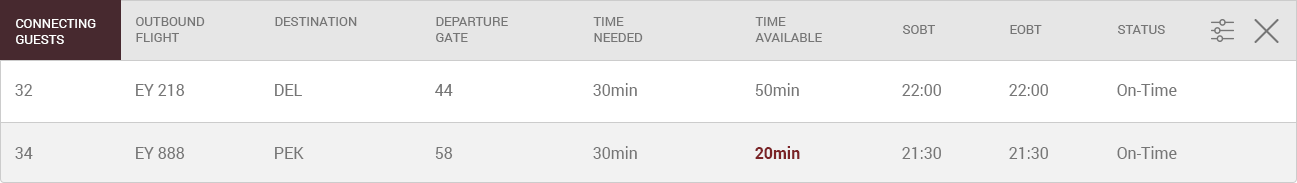
<style>
.page{position:relative;width:1297px;height:183px;background:#ffffff}
.page>*{position:absolute;margin:0}
.t1{font:13px "Roboto-Regular";color:#767676;text-transform:uppercase}
.t2{font:13px "Roboto-Regular";color:#ffffff;text-transform:uppercase}
.t3{font:16px "Roboto-Regular";color:#767676}
.t4{font:16px "Roboto-Bold";color:#7b2326}
</style>
<div class="page">
<p class="t1" style="left:136px;top:17px;width:69px;height:25px">Outbound<br>Flight</p>
<p class="t1" style="left:275px;top:17px;width:82px;height:9px">Destination</p>
<p class="t1" style="left:436px;top:17px;width:72px;height:25px">Departure<br>Gate</p>
<p class="t1" style="left:593px;top:17px;width:50px;height:25px">Time<br>Needed</p>
<p class="t1" style="left:755px;top:17px;width:67px;height:25px">Time<br>Available</p>
<p class="t2" style="left:16px;top:19px;width:80px;height:25px">ConnectING<br>Guests</p>
<p class="t1" style="left:903px;top:25px;width:32px;height:9px">SOBT</p>
<p class="t1" style="left:1010px;top:25px;width:32px;height:9px">Eobt</p>
<p class="t1" style="left:1118px;top:25px;width:47px;height:9px">Status</p>
<p class="t3" style="left:15px;top:84px;width:18px;height:12px">32</p>
<p class="t3" style="left:136px;top:84px;width:49px;height:12px">EY 218</p>
<p class="t3" style="left:275px;top:84px;width:27px;height:12px">DEL</p>
<p class="t3" style="left:435px;top:84px;width:18px;height:12px">44</p>
<p class="t3" style="left:593px;top:83px;width:44px;height:13px">30min</p>
<p class="t3" style="left:755px;top:83px;width:44px;height:13px">50min</p>
<p class="t3" style="left:902px;top:84px;width:39px;height:12px">22:00</p>
<p class="t3" style="left:1009px;top:84px;width:39px;height:12px">22:00</p>
<p class="t3" style="left:1117px;top:83px;width:60px;height:13px">On-Time</p>
<p class="t3" style="left:15px;top:147px;width:18px;height:12px">34</p>
<p class="t3" style="left:136px;top:147px;width:49px;height:12px">EY 888</p>
<p class="t3" style="left:275px;top:147px;width:29px;height:12px">PEK</p>
<p class="t3" style="left:435px;top:147px;width:18px;height:12px">58</p>
<p class="t3" style="left:593px;top:146px;width:44px;height:13px">30min</p>
<p class="t4" style="left:755px;top:146px;width:45px;height:13px">20min</p>
<p class="t3" style="left:902px;top:147px;width:39px;height:12px">21:30</p>
<p class="t3" style="left:1009px;top:147px;width:39px;height:12px">21:30</p>
<p class="t3" style="left:1117px;top:146px;width:60px;height:13px">On-Time</p>
</div>
